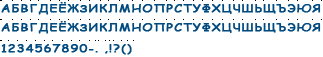
<style>
.page{position:relative;width:323px;height:57px;background:#ffffff}
.page>*{position:absolute;margin:0}
.t1{font:10px/20px "ComicSansMS";letter-spacing:0.075em;color:#004a80;font-weight:bold;scale:1.26 1}
.t2{font:10px "ComicSansMS";letter-spacing:0.075em;color:#004a80;font-weight:bold;scale:1.26 1}
</style>
<div class="page">
<p class="t1" style="left:1px;top:2px;width:320px;height:53px">АБВГДЕЁЖЗИКЛМНОПРСТУФХЦЧШЬЩЪЭЮЯ<br><br>1234567890-. ,!?()</p>
<p class="t2" style="left:1px;top:21px;width:320px;height:13px">АБВГДЕЁЖЗИКЛМНОПРСТУФХЦЧШЬЩЪЭЮЯ</p>
</div>
